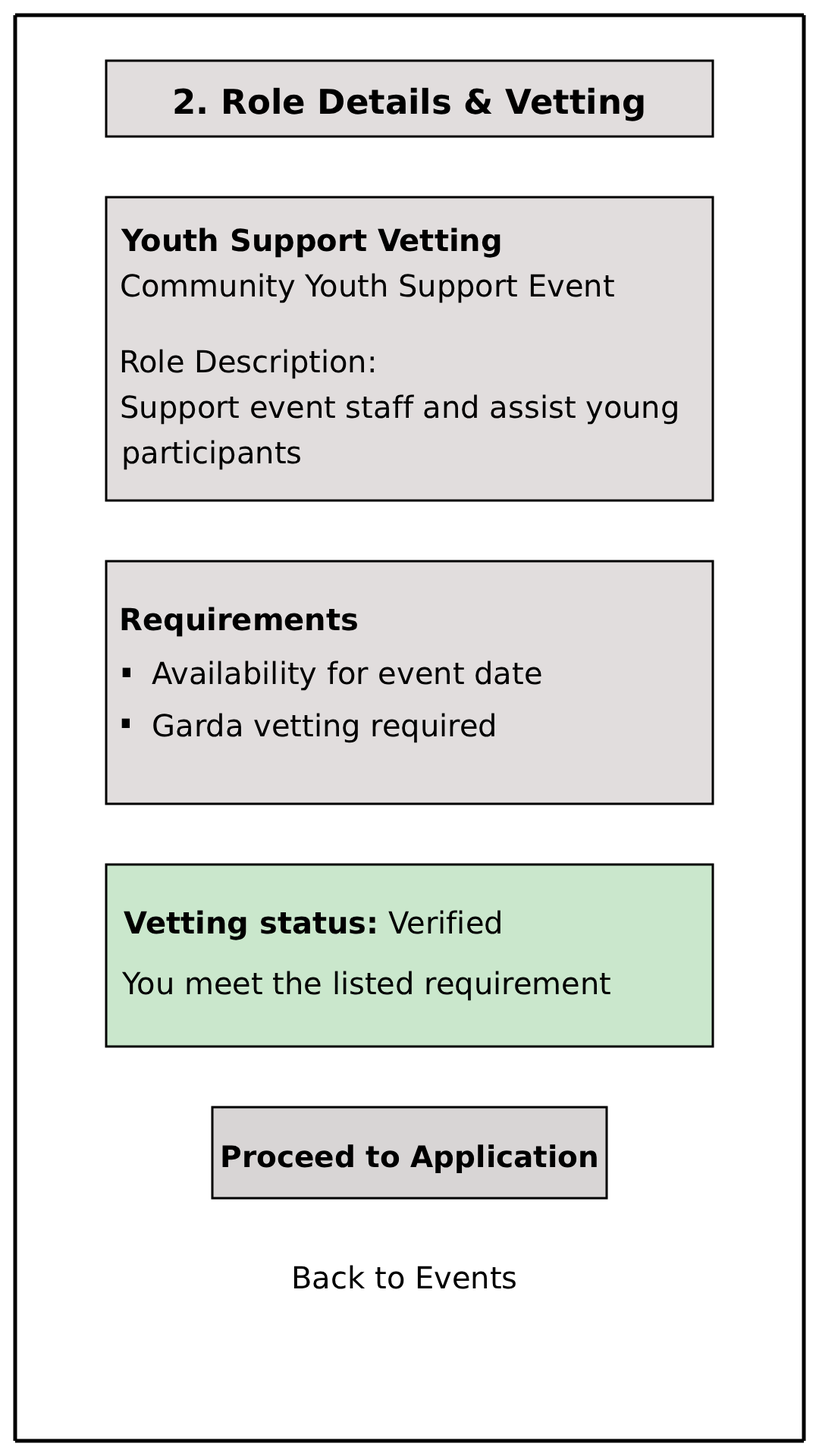
<style>
.page{position:relative;width:819px;height:1456px;background:#ffffff}
.page>*{position:absolute;margin:0}
.t1{font:34.1px "DejaVuSans-Bold";color:#000000}
.t2{font:30.3px "DejaVuSans-Bold";color:#000000}
.t3{font:30.3px "DejaVuSans";color:#000000}
.t4{font:75.8px "DejaVuSans";color:#000000}
.t5{font:29.6px "DejaVuSans-Bold";color:#000000}
</style>
<div class="page">
<p class="t1" style="left:174px;top:87px;width:470px;height:34px">2. Role Details &amp; Vetting</p>
<p class="t2" style="left:121px;top:227px;width:379px;height:31px">Youth Support Vetting</p>
<p class="t3" style="left:121px;top:273px;width:493px;height:30px">Community Youth Support Event</p>
<p class="t3" style="left:121px;top:349px;width:253px;height:30px">Role Description:</p>
<p class="t3" style="left:121px;top:394px;width:556px;height:31px">Support event staff and assist young</p>
<p class="t3" style="left:124px;top:440px;width:176px;height:30px">participants</p>
<p class="t2" style="left:121px;top:607px;width:236px;height:30px">Requirements</p>
<p class="t3" style="left:152px;top:660px;width:389px;height:31px">Availability for event date</p>
<p class="t4" style="left:122px;top:667px;width:8px;height:10px">.</p>
<p class="t3" style="left:153px;top:713px;width:341px;height:30px">Garda vetting required</p>
<p class="t4" style="left:121px;top:718px;width:9px;height:10px">.</p>
<p class="t2" style="left:124px;top:910px;width:376px;height:30px">Vetting status: <span class="t3">Verified</span></p>
<p class="t3" style="left:121px;top:971px;width:489px;height:30px">You meet the listed requirement</p>
<p class="t5" style="left:222px;top:1144px;width:375px;height:30px">Proceed to Application</p>
<p class="t3" style="left:293px;top:1265px;width:223px;height:24px">Back to Events</p>
</div>
